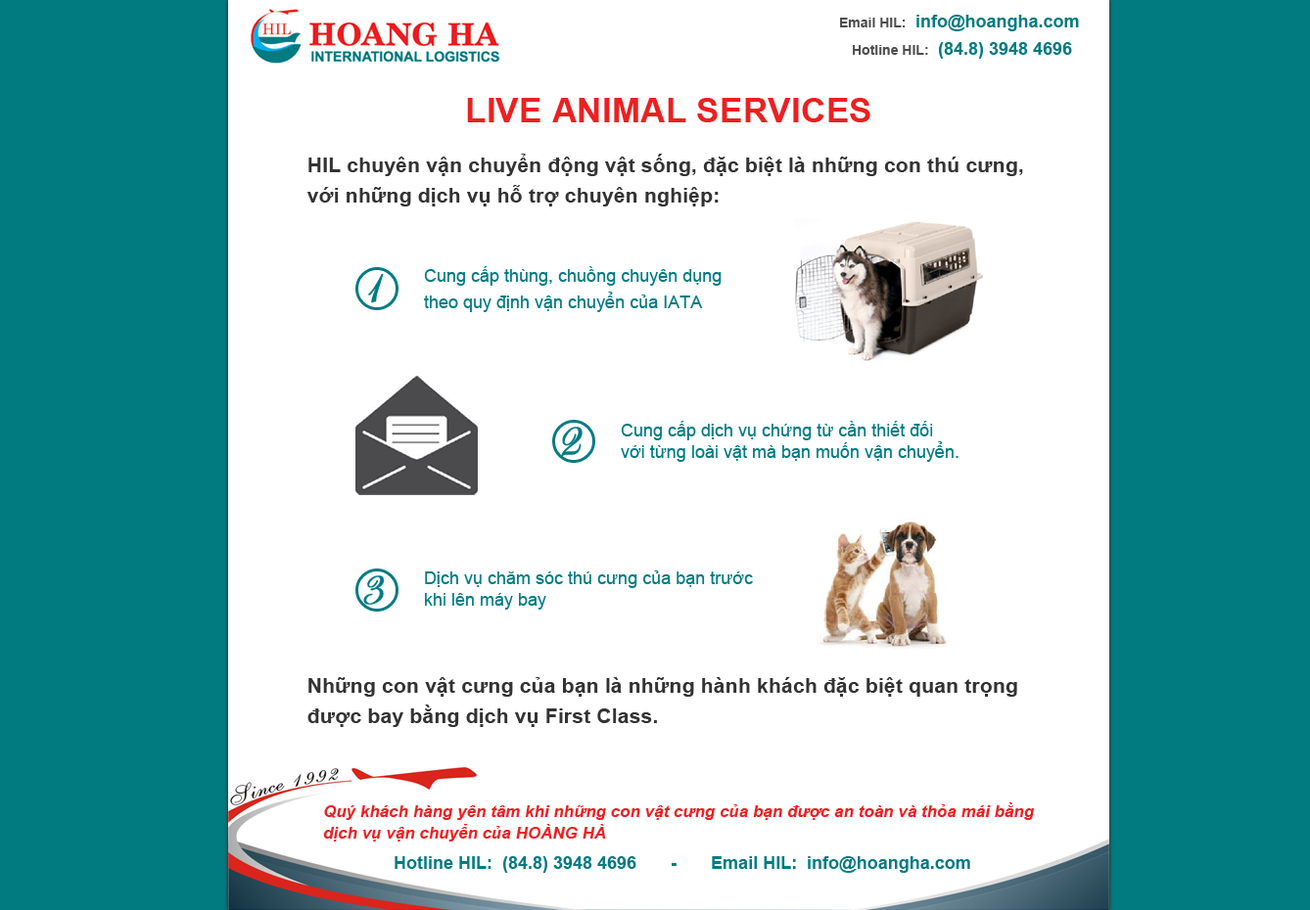
<style>
.page{position:relative;width:1310px;height:910px;background:#ffffff}
.page>*{position:absolute;margin:0}
.t1{font:13.7px "Arial-BoldMT";color:#4d4d4d}
.t2{font:17.6px "Arial-BoldMT";color:#017b80}
.t3{font:34.7px "Arial-BoldMT";color:#ec2021}
.t4{font:21px/27.2px "Arial-BoldMT";color:#333333}
.t5{font:17.6px/21.5px "ArialMT";color:#007b82}
.t6{font:47px "EdwardianScriptITC";color:#007b82;font-weight:bold}
.t7{font:16.6px/21.5px "Arial-BoldItalicMT";color:#ec2021}
.t8{font:17.6px "Arial-BoldMT";color:#007b82}
</style>
<div class="page">
<p class="t1" style="left:840px;top:18px;width:66px;height:9px">Email HIL:</p>
<p class="t2" style="left:916px;top:15px;width:163px;height:16px">info@hoangha.com</p>
<p class="t1" style="left:853px;top:45px;width:75px;height:10px">Hotline HIL:</p>
<p class="t2" style="left:939px;top:42px;width:133px;height:17px">(84.8) 3948 4696</p>
<p class="t3" style="left:467px;top:98px;width:403px;height:24px">LIVE ANIMAL SERVICES</p>
<p class="t4" style="left:307px;top:154px;width:716px;height:53px">HIL chuyên vận chuyển động vật sống, đặc biệt là những con thú cưng,<br>với những dịch vụ hỗ trợ chuyên nghiệp:</p>
<p class="t5" style="left:424px;top:266px;width:297px;height:46px">Cung cấp thùng, chuồng chuyên dụng<br>theo quy định vận chuyển của IATA</p>
<p class="t6" style="left:368px;top:274px;width:16px;height:29px;rotate:-15deg">1</p>
<p class="t5" style="left:621px;top:421px;width:337px;height:41px">Cung cấp dịch vụ chứng từ cần thiết đối với từng loài vật mà bạn muốn vận chuyển.</p>
<p class="t6" style="left:561px;top:427px;width:21px;height:31px;rotate:-15deg">2</p>
<p class="t6" style="left:363px;top:576px;width:21px;height:29px;rotate:-15deg">3</p>
<p class="t5" style="left:425px;top:571px;width:328px;height:39px">Dịch vụ chăm sóc thú cưng của bạn trước khi lên máy bay</p>
<p class="t4" style="left:307px;top:677px;width:710px;height:50px">Những con vật cưng của bạn là những hành khách đặc biệt quan trọng<br>được bay bằng dịch vụ First Class.</p>
<p class="t7" style="left:323px;top:803px;width:711px;height:39px">Quý khách hàng yên tâm khi những con vật cưng của bạn được an toàn và thỏa mái bằng dịch vụ vận chuyển của HOÀNG HÀ</p>
<p class="t8" style="left:395px;top:857px;width:575px;height:16px">Hotline HIL:  (84.8) 3948 4696       -       Email HIL:  info@hoangha.com</p>
</div>
